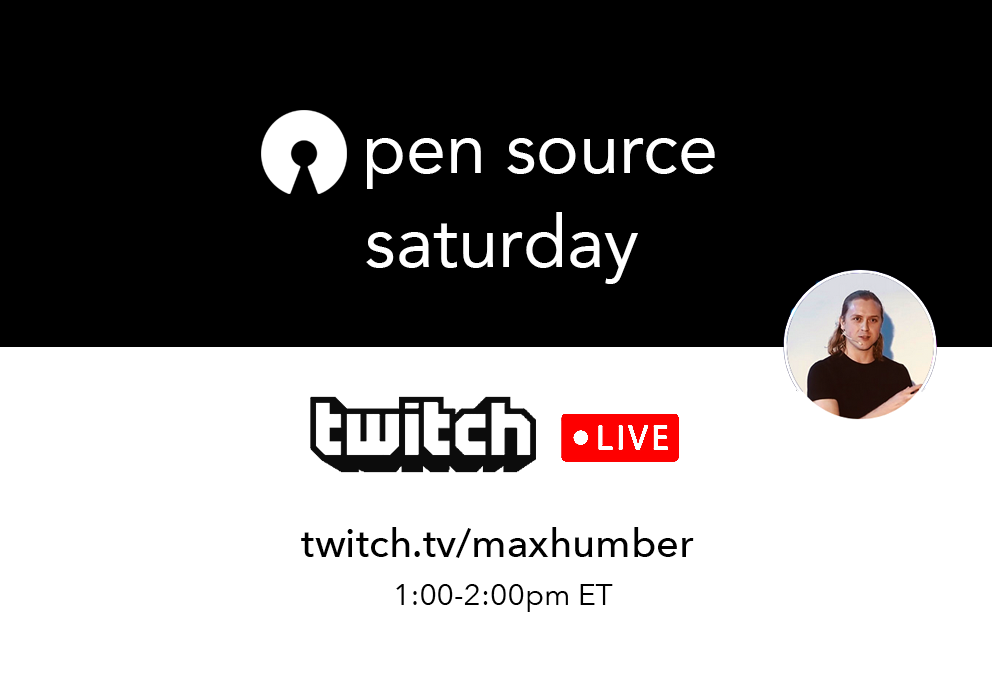
<style>
.page{position:relative;width:992px;height:679px;background:#000000}
.page>*{position:absolute;margin:0}
.t1{font:72px "Avenir-Roman";color:#ffffff}
.t2{font:40px "AvenirNext-Medium";color:#000000}
.t3{font:30px "AvenirNext-Regular";color:#000000}
</style>
<div class="page">
<p class="t1" style="left:367px;top:138px;width:348px;height:51px">pen source</p>
<p class="t1" style="left:366px;top:212px;width:272px;height:72px">saturday</p>
<p class="t2" style="left:301px;top:527px;width:393px;height:85px;text-align:center">twitch.tv/maxhumber <br><br><span class="t3">1:00-2:00pm ET</span></p>
</div>
